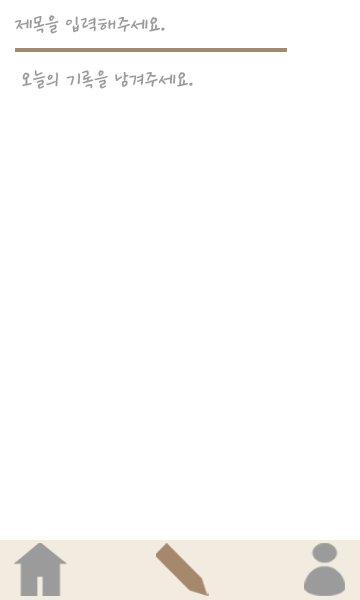
<style>
.page{position:relative;width:360px;height:600px;background:#ffffff}
.page>*{position:absolute;margin:0}
.t1{font:22.1px "Ownglyph_Dailyokja-Rg";color:#9c9b9b}
</style>
<div class="page">
<p class="t1" style="left:14px;top:15px;width:151px;height:19px">제목을 입력해주세요.</p>
<p class="t1" style="left:22px;top:70px;width:171px;height:19px">오늘의 기록을 남겨주세요.</p>
</div>
